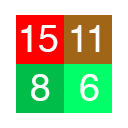
<style>
.page{position:relative;width:128px;height:128px;background:#ffffff}
.page>*{position:absolute;margin:0}
.t1{font:9.2px "Helvetica";color:#ffffff}
</style>
<div class="page">
<p class="t1" style="left:21px;top:25px;width:37px;height:27px">15</p>
<p class="t1" style="left:71px;top:25px;width:29px;height:27px">11</p>
<p class="t1" style="left:31px;top:74px;width:19px;height:27px">8</p>
<p class="t1" style="left:80px;top:74px;width:19px;height:27px;text-align:center">6</p>
</div>
